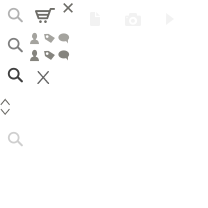
<style>
.page{position:relative;width:208px;height:208px;background:#ffffff}
.page>*{position:absolute;margin:0}
.t1{font:20px "Hero";color:#666666}
.t2{font:15.9px "DidactGothic";color:#6d6c67}
.t3{font:15.4px "DidactGothic";color:#6d6c67}
</style>
<div class="page">
<p class="t1" style="left:37px;top:71px;width:13px;height:13px">X</p>
<p class="t2" style="left:0px;top:98px;width:10px;height:8px;rotate:-90deg">&gt;</p>
<p class="t3" style="left:0px;top:108px;width:10px;height:7px;rotate:90deg">&gt;</p>
</div>
